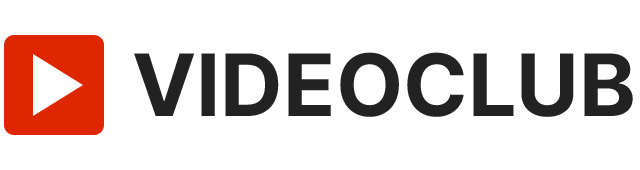
<style>
.page{position:relative;width:640px;height:170px;background:#ffffff}
.page>*{position:absolute;margin:0}
.t1{font:86px "Inter-Bold";color:#222222}
</style>
<div class="page">
<p class="t1" style="left:134px;top:52px;width:499px;height:65px">VIDEOCLUB</p>
</div>
